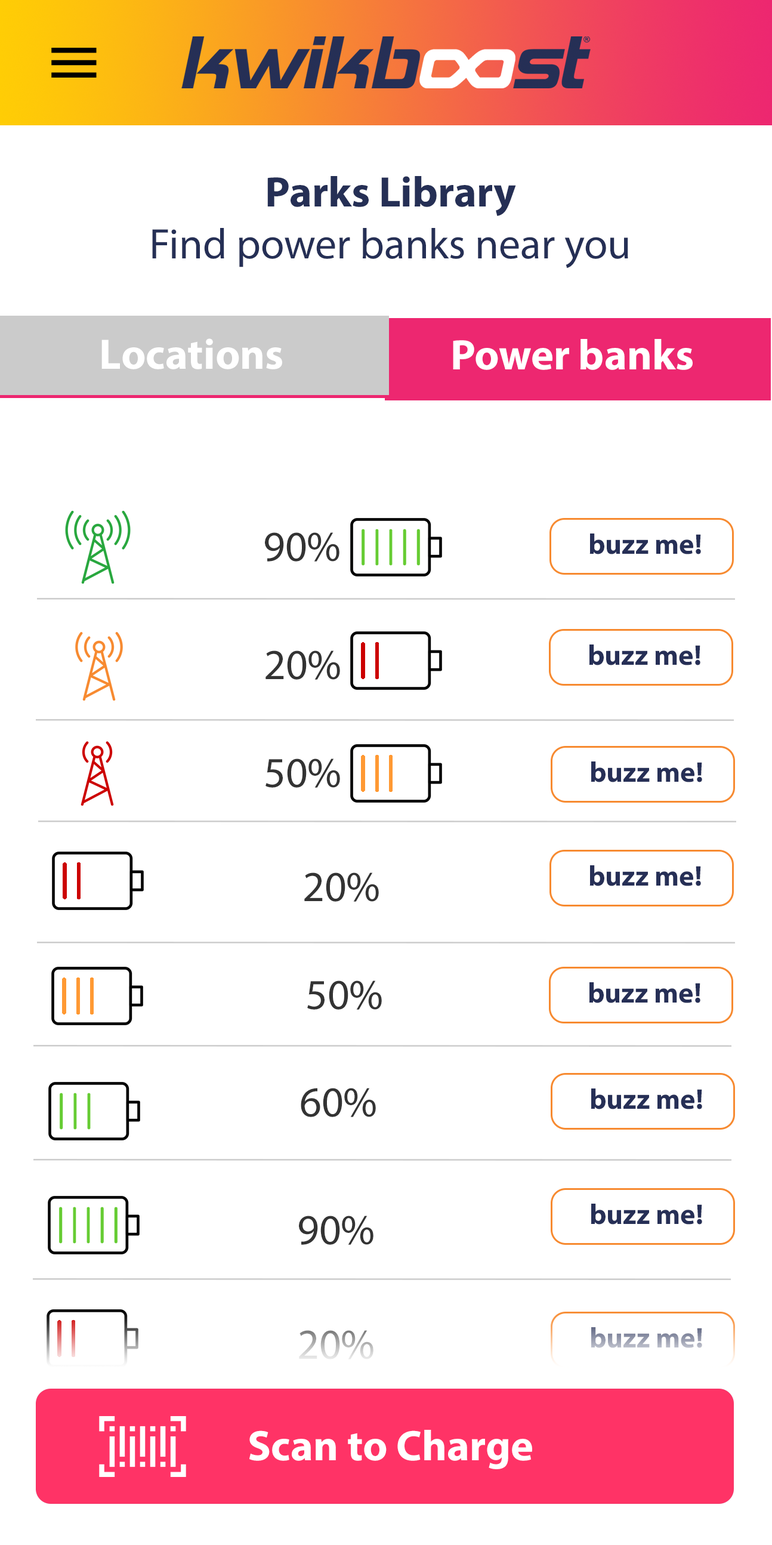
<style>
.page{position:relative;width:772px;height:1545px;background:#ffffff}
.page>*{position:absolute;margin:0}
.t1{font:43px "MyriadPro-Regular";color:#252f55}
.t2{font:43px "MyriadPro-Bold";color:#252f55}
.t3{font:43px "MyriadPro-Bold";color:#ffffff}
.t4{font:43px "MyriadPro-Regular";color:#333333}
.t5{font:28.6px "MyriadPro-Bold";color:#262f56}
.t6{font:43px "MyriadPro-Regular"}
.t7{font:28.6px "MyriadPro-Bold"}
</style>
<div class="page">
<p class="t1" style="left:152px;top:176px;width:476px;height:92px;text-align:center"><span class="t2">Parks Library<br></span>Find power banks near you</p>
<p class="t3" style="left:101px;top:338px;width:181px;height:31px">Locations</p>
<p class="t3" style="left:453px;top:339px;width:240px;height:31px">Power banks</p>
<p class="t4" style="left:265px;top:532px;width:74px;height:29px">90%</p>
<p class="t5" style="left:589px;top:533px;width:112px;height:21px">buzz me!</p>
<p class="t4" style="left:265px;top:650px;width:75px;height:30px">20%</p>
<p class="t5" style="left:589px;top:644px;width:111px;height:21px">buzz me!</p>
<p class="t4" style="left:265px;top:758px;width:75px;height:30px">50%</p>
<p class="t5" style="left:591px;top:761px;width:111px;height:21px">buzz me!</p>
<p class="t5" style="left:589px;top:865px;width:112px;height:21px">buzz me!</p>
<p class="t4" style="left:304px;top:872px;width:75px;height:29px">20%</p>
<p class="t4" style="left:307px;top:980px;width:75px;height:29px">50%</p>
<p class="t5" style="left:589px;top:982px;width:111px;height:21px">buzz me!</p>
<p class="t4" style="left:301px;top:1088px;width:75px;height:29px">60%</p>
<p class="t5" style="left:591px;top:1088px;width:111px;height:21px">buzz me!</p>
<p class="t5" style="left:591px;top:1203px;width:111px;height:21px">buzz me!</p>
<p class="t4" style="left:299px;top:1215px;width:74px;height:30px">90%</p>
<p class="t6" style="left:299px;top:1330px;width:74px;height:29px">20%</p>
<p class="t7" style="left:591px;top:1327px;width:111px;height:21px">buzz me!</p>
<p class="t3" style="left:249px;top:1429px;width:283px;height:40px">Scan to Charge</p>
</div>
